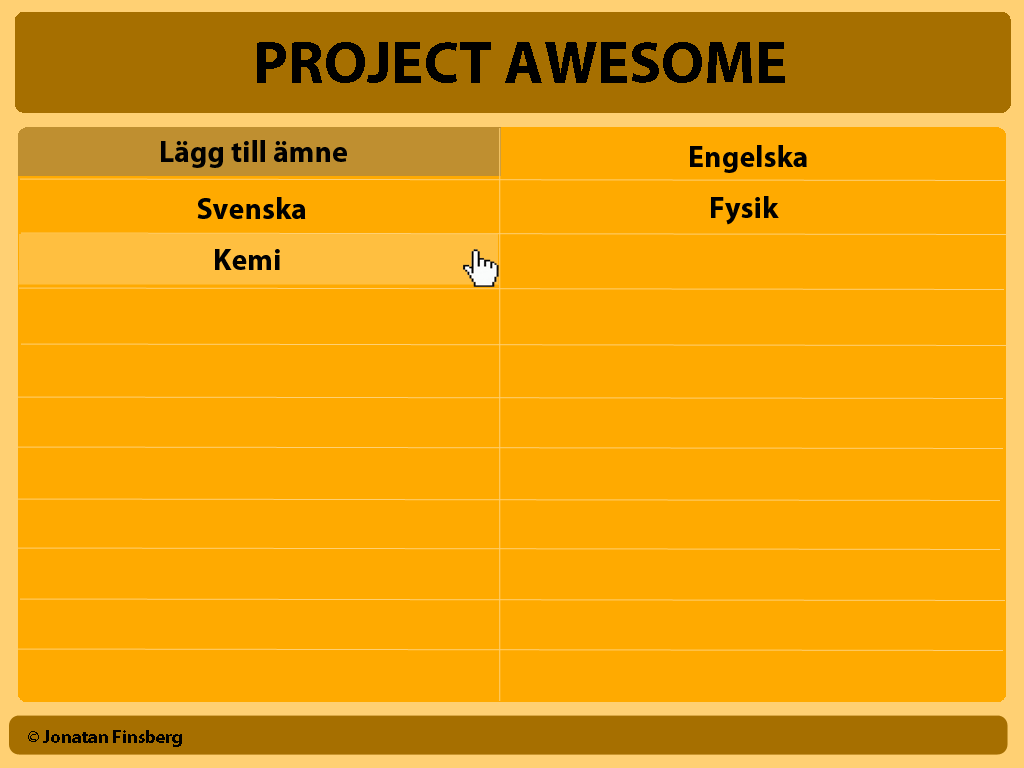
<style>
.page{position:relative;width:1024px;height:768px;background:#ffaa00}
.page>*{position:absolute;margin:0}
.t1{font:60px "MyriadPro-Bold";color:#000000}
.t2{font:30px "MyriadPro-Bold";color:#000000}
.t3{font:18px "MyriadPro-Bold";color:#000000}
</style>
<div class="page">
<p class="t1" style="left:257px;top:42px;width:528px;height:41px">PROJECT AWESOME</p>
<p class="t2" style="left:161px;top:140px;width:186px;height:28px">Lägg till ämne</p>
<p class="t2" style="left:690px;top:145px;width:117px;height:28px">Engelska</p>
<p class="t2" style="left:197px;top:197px;width:109px;height:22px">Svenska</p>
<p class="t2" style="left:711px;top:196px;width:68px;height:29px">Fysik</p>
<p class="t2" style="left:215px;top:249px;width:65px;height:21px">Kemi</p>
<p class="t3" style="left:28px;top:730px;width:154px;height:17px">© Jonatan Finsberg</p>
</div>
